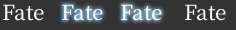
<style>
.page{position:relative;width:236px;height:30px;background:#333333}
.page>*{position:absolute;margin:0}
.t1{font:25px "OfficialFateFont-Medium";color:#ffffff}
</style>
<div class="page">
<p class="t1" style="left:3px;top:4px;width:41px;height:17px">Fate</p>
<p class="t1" style="left:62px;top:4px;width:41px;height:17px">Fate</p>
<p class="t1" style="left:121px;top:4px;width:41px;height:17px">Fate</p>
<p class="t1" style="left:185px;top:4px;width:41px;height:17px">Fate</p>
</div>
